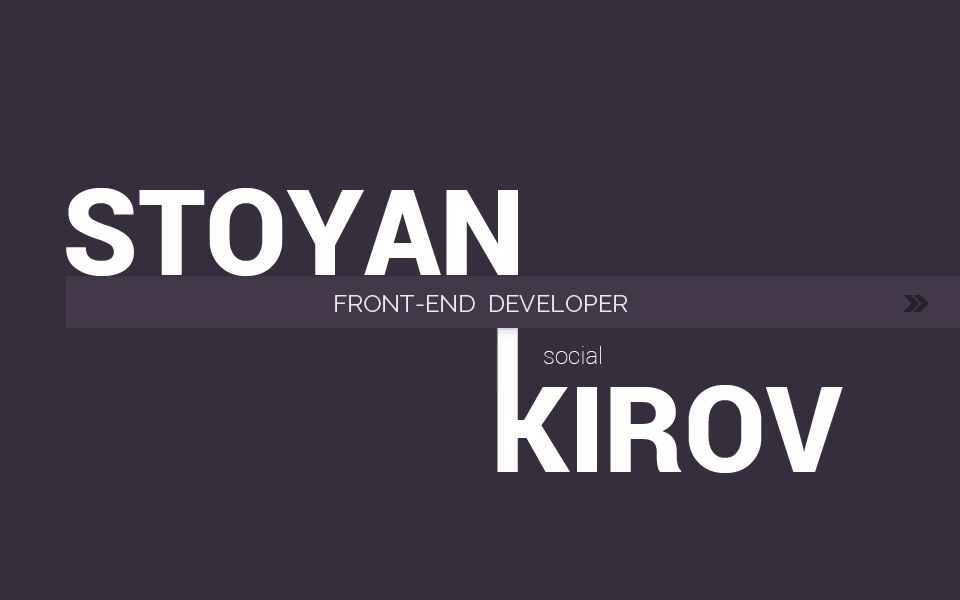
<style>
.page{position:relative;width:960px;height:600px;background:#372e3d}
.page>*{position:absolute;margin:0}
.t1{font:120px "Roboto-Black";color:#ffffff}
.t2{font:24px "Raleway-Regular";color:#eaeaea}
.t3{font:24px "Roboto-Thin";color:#ffffff}
</style>
<div class="page">
<p class="t1" style="left:66px;top:188px;width:452px;height:88px">STOYAN</p>
<p class="t2" style="left:335px;top:295px;width:293px;height:17px">FRONT-END  DEVELOPER</p>
<p class="t3" style="left:544px;top:346px;width:57px;height:18px">social</p>
<p class="t1" style="left:497px;top:385px;width:346px;height:88px">KIROV</p>
</div>
